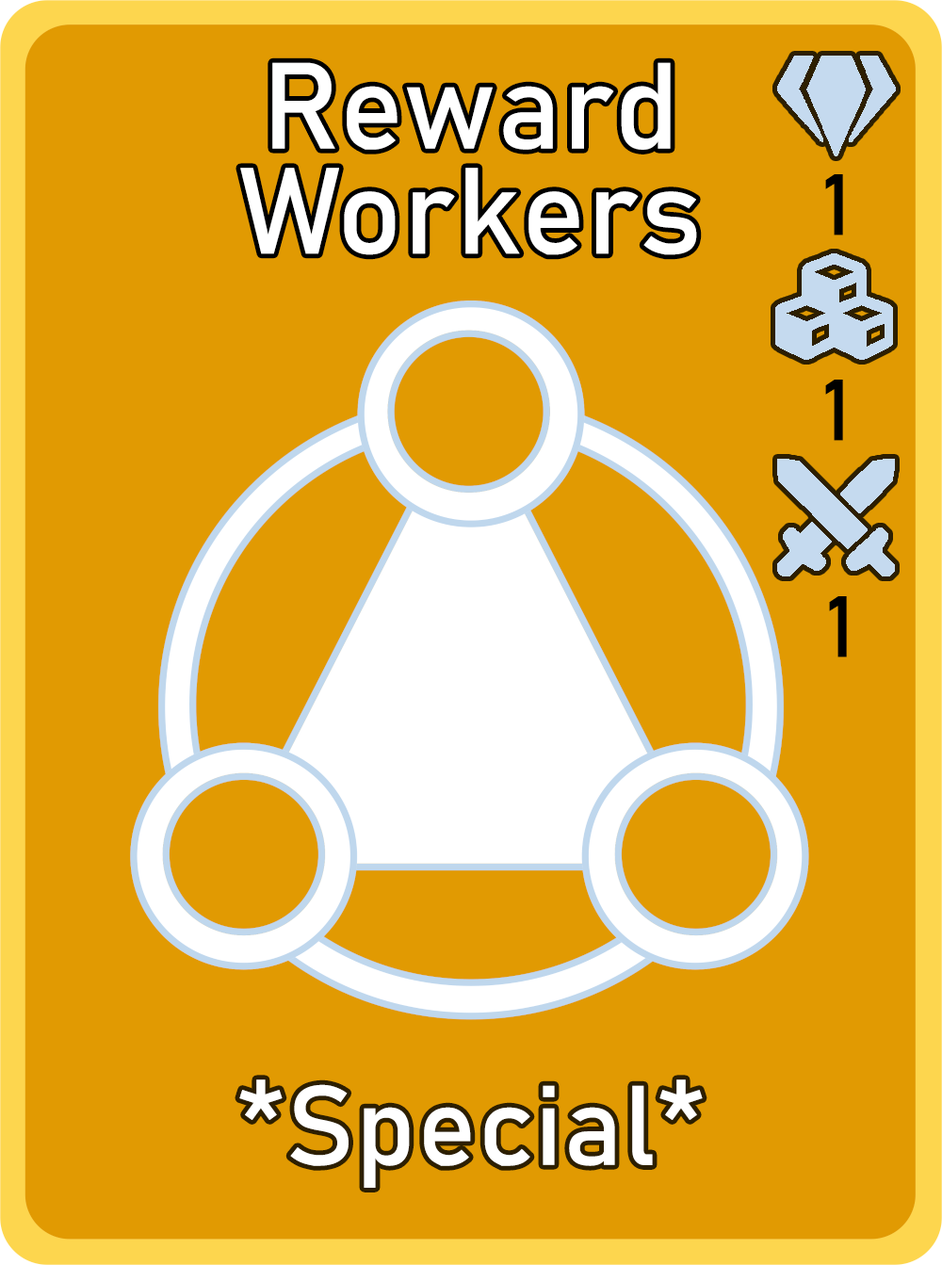
<style>
.page{position:relative;width:942px;height:1265px;background:#e19a02}
.page>*{position:absolute;margin:0}
.t1{font:120.6px/105.1px "Bahnschrift";letter-spacing:0.01em;color:#ffffff}
.t2{font:85px "Bahnschrift";letter-spacing:0.01em;color:#000000}
.t3{font:111.3px "Bahnschrift";letter-spacing:0.01em;color:#ffffff}
</style>
<div class="page">
<p class="t1" style="left:240px;top:62px;width:457px;height:193px;text-align:center">Reward<br>Workers</p>
<p class="t2" style="left:825px;top:174px;width:18px;height:62px">1</p>
<p class="t2" style="left:825px;top:380px;width:18px;height:61px">1</p>
<p class="t2" style="left:829px;top:596px;width:18px;height:62px">1</p>
<p class="t3" style="left:239px;top:1080px;width:464px;height:108px">*Special*</p>
</div>
